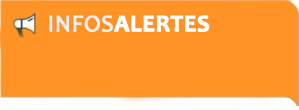
<style>
.page{position:relative;width:299px;height:110px;background:#ff9326}
.page>*{position:absolute;margin:0}
.t1{font:24px "Candara-Bold";color:#ffffff;font-weight:bold}
.t2{font:24px "Candara";color:#ebefef;font-weight:bold}
</style>
<div class="page">
<p class="t1" style="left:49px;top:15px;width:161px;height:17px"><span class="t2">INFOS</span>ALERTES</p>
</div>
